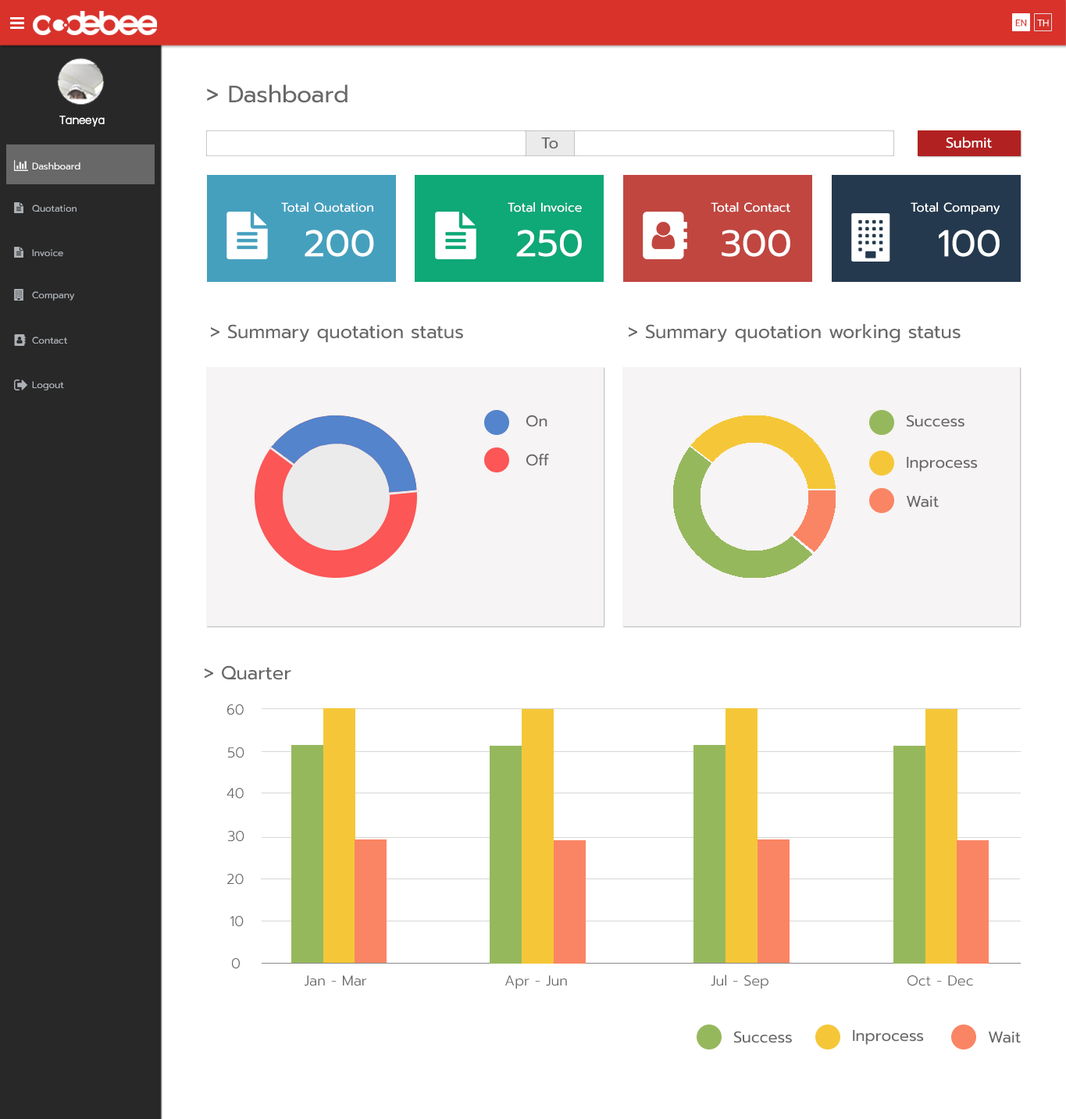
<style>
.page{position:relative;width:1066px;height:1119px;background:#ffffff}
.page>*{position:absolute;margin:0}
.t1{font:9.4px "Prompt-Regular";color:#d8322b}
.t2{font:9.4px "Prompt-Regular";color:#ffffff}
.t3{font:23.4px "Prompt-Regular";color:#686868}
.t4{font:14.1px "supermarket";color:#ffffff}
.t5{font:15.6px "Prompt-Regular";color:#686868}
.t6{font:14.1px "Prompt-Regular";color:#ffffff}
.t7{font:9.4px "Prompt-Regular";color:#aeb2b7}
.t8{font:12.5px "Prompt-Regular";color:#ffffff}
.t9{font:37.5px "Prompt-Regular";color:#ffffff}
.t10{font:18.7px "Prompt-Regular";color:#686868}
.t11{font:14.1px "Prompt-Light";color:#686868}
</style>
<div class="page">
<p class="t1" style="left:1015px;top:20px;width:12px;height:7px">EN</p>
<p class="t2" style="left:1037px;top:20px;width:12px;height:7px">TH</p>
<p class="t3" style="left:207px;top:84px;width:140px;height:19px">&gt; Dashboard</p>
<p class="t4" style="left:59px;top:116px;width:46px;height:10px">Taneeya</p>
<p class="t5" style="left:541px;top:137px;width:17px;height:12px">To</p>
<p class="t6" style="left:946px;top:137px;width:46px;height:11px">Submit</p>
<p class="t2" style="left:32px;top:162px;width:48px;height:8px">Dashboard</p>
<p class="t7" style="left:32px;top:205px;width:45px;height:7px">Quotation</p>
<p class="t8" style="left:281px;top:202px;width:92px;height:10px">Total Quotation</p>
<p class="t8" style="left:508px;top:202px;width:74px;height:10px">Total Invoice</p>
<p class="t8" style="left:711px;top:202px;width:79px;height:10px">Total Contact</p>
<p class="t8" style="left:910px;top:202px;width:90px;height:13px">Total Company</p>
<p class="t9" style="left:305px;top:230px;width:69px;height:27px">200</p>
<p class="t9" style="left:516px;top:230px;width:66px;height:27px">250</p>
<p class="t9" style="left:721px;top:230px;width:69px;height:27px">300</p>
<p class="t9" style="left:938px;top:230px;width:61px;height:27px">100</p>
<p class="t7" style="left:32px;top:249px;width:31px;height:8px">Invoice</p>
<p class="t7" style="left:32px;top:291px;width:43px;height:10px">Company</p>
<p class="t10" style="left:211px;top:324px;width:252px;height:19px">&gt; Summary quotation status</p>
<p class="t10" style="left:629px;top:324px;width:331px;height:19px">&gt; Summary quotation working status</p>
<p class="t7" style="left:32px;top:337px;width:35px;height:7px">Contact</p>
<p class="t7" style="left:32px;top:381px;width:32px;height:9px">Logout</p>
<p class="t5" style="left:526px;top:415px;width:21px;height:12px">On</p>
<p class="t5" style="left:906px;top:415px;width:58px;height:12px">Success</p>
<p class="t5" style="left:526px;top:454px;width:23px;height:12px">Off</p>
<p class="t5" style="left:906px;top:457px;width:72px;height:15px">Inprocess</p>
<p class="t5" style="left:906px;top:496px;width:32px;height:12px">Wait</p>
<p class="t10" style="left:205px;top:665px;width:86px;height:15px">&gt; Quarter</p>
<p class="t11" style="left:227px;top:704px;width:17px;height:11px">60</p>
<p class="t11" style="left:228px;top:747px;width:16px;height:11px">50</p>
<p class="t11" style="left:226px;top:788px;width:18px;height:11px">40</p>
<p class="t11" style="left:228px;top:831px;width:16px;height:11px">30</p>
<p class="t11" style="left:227px;top:874px;width:17px;height:11px">20</p>
<p class="t11" style="left:230px;top:916px;width:14px;height:11px">10</p>
<p class="t11" style="left:232px;top:958px;width:8px;height:11px">0</p>
<p class="t11" style="left:305px;top:975px;width:62px;height:11px">Jan - Mar</p>
<p class="t11" style="left:505px;top:975px;width:62px;height:13px">Apr - Jun</p>
<p class="t11" style="left:711px;top:974px;width:57px;height:14px">Jul - Sep</p>
<p class="t11" style="left:907px;top:975px;width:66px;height:11px">Oct - Dec</p>
<p class="t5" style="left:734px;top:1031px;width:58px;height:12px">Success</p>
<p class="t5" style="left:853px;top:1030px;width:71px;height:15px">Inprocess</p>
<p class="t5" style="left:988px;top:1031px;width:32px;height:12px">Wait</p>
</div>
